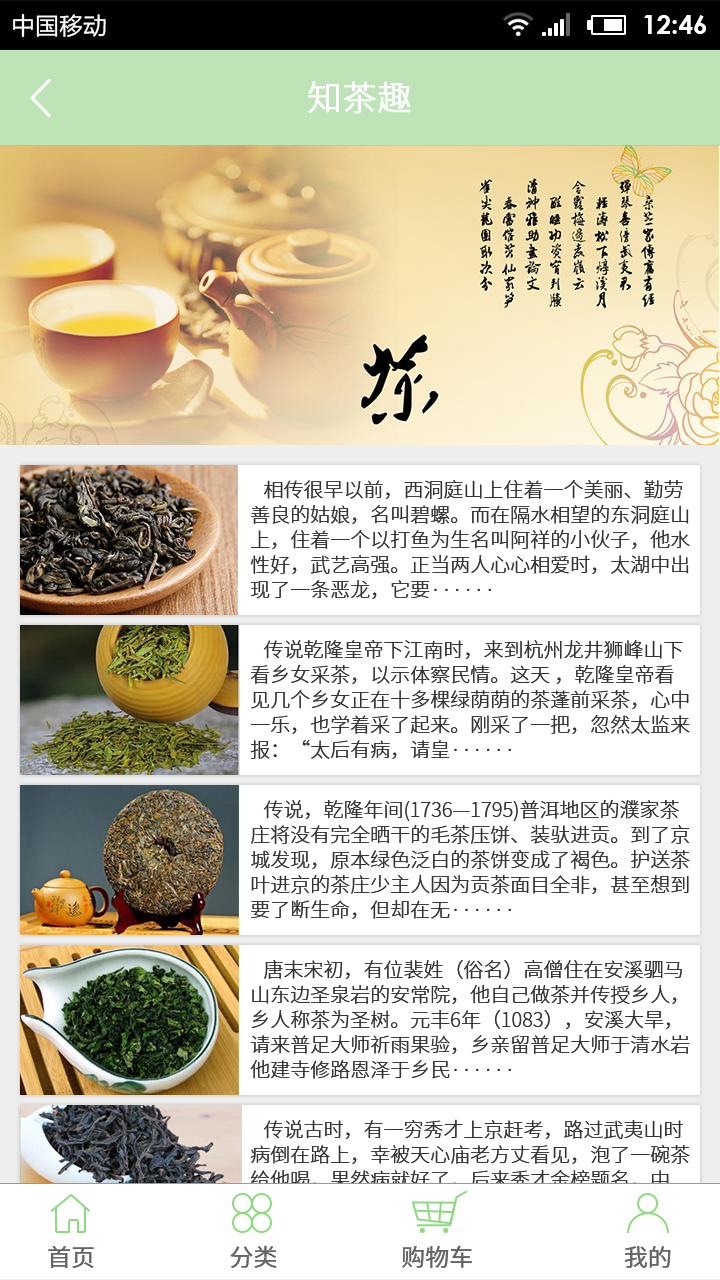
<style>
.page{position:relative;width:720px;height:1280px;background:#ffffff}
.page>*{position:absolute;margin:0}
.t1{font:34px "NotoSansHans-Light";color:#ffffff;font-weight:bold}
.t2{font:20px/25px "NotoSansHans-Light";color:#333333}
.t3{font:24px "NotoSansHans-Regular";color:#666666;text-transform:uppercase}
</style>
<div class="page">
<p class="t1" style="left:308px;top:81px;width:103px;height:33px">知茶趣</p>
<p class="t2" style="left:250px;top:480px;width:440px;height:119px">相传很早以前，西洞庭山上住着一个美丽、勤劳善良的姑娘，名叫碧螺。而在隔水相望的东洞庭山上，住着一个以打鱼为生名叫阿祥的小伙子，他水性好，武艺高强。正当两人心心相爱时，太湖中出现了一条恶龙，它要······</p>
<p class="t2" style="left:250px;top:640px;width:440px;height:119px">传说乾隆皇帝下江南时，来到杭州龙井狮峰山下看乡女采茶，以示体察民情。这天 ，乾隆皇帝看见几个乡女正在十多棵绿荫荫的茶蓬前采茶，心中一乐，也学着采了起来。刚采了一把，忽然太监来报：“太后有病，请皇······</p>
<p class="t2" style="left:251px;top:799px;width:439px;height:120px">传说，乾隆年间(1736—1795)普洱地区的濮家茶庄将没有完全晒干的毛茶压饼、装驮进贡。到了京城发现，原本绿色泛白的茶饼变成了褐色。护送茶叶进京的茶庄少主人因为贡茶面目全非，甚至想到要了断生命，但却在无······</p>
<p class="t2" style="left:250px;top:960px;width:440px;height:119px">唐末宋初，有位裴姓（俗名）高僧住在安溪驷马山东边圣泉岩的安常院，他自己做茶并传授乡人，乡人称茶为圣树。元丰6年（1083），安溪大旱，请来普足大师祈雨果验，乡亲留普足大师于清水岩他建寺修路恩泽于乡民······</p>
<p class="t2" style="left:250px;top:1119px;width:440px;height:120px">传说古时，有一穷秀才上京赶考，路过武夷山时病倒在路上，幸被天心庙老方丈看见，泡了一碗茶给他喝，果然病就好了，后来秀才金榜题名，中了状元，还被招为东床驸马。一个春日，状元来到武夷山谢恩，在老方丈······</p>
<p class="t3" style="left:48px;top:1245px;width:623px;height:23px">首页                         分类                       购物车                            我的</p>
</div>
